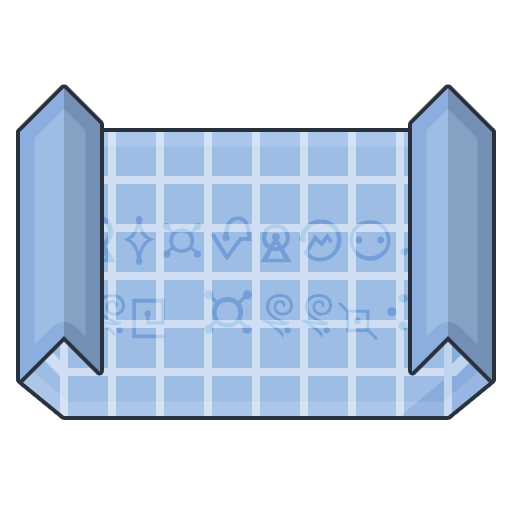
<style>
.page{position:relative;width:512px;height:512px;background:#ffffff}
.page>*{position:absolute;margin:0}
.t1{font:64px/76.8px "Futurama-Alien-Alphabet-One-Regular"}
</style>
<div class="page">
<p class="t1" style="left:76px;top:214px;width:361px;height:126px;text-align:center">Redprint<br>of Doom!</p>
</div>
